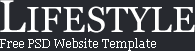
<style>
.page{position:relative;width:195px;height:51px;background:#27292f}
.page>*{position:absolute;margin:0}
.t1{font:36px "Georgia";color:#ffffff}
.t2{font:46px "Georgia";color:#ffffff}
.t3{font:12px "Georgia";color:#ffffff}
</style>
<div class="page">
<p class="t1" style="left:0px;top:0px;width:195px;height:33px"><span class="t2">L</span>IFESTYLE</p>
<p class="t3" style="left:0px;top:38px;width:156px;height:13px">Free PSD Website Template</p>
</div>
